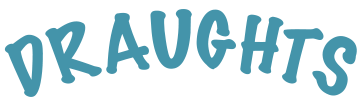
<style>
.page{position:relative;width:362px;height:104px;background:#ffffff}
.page>*{position:absolute;margin:0}
.t1{font:70px "MarkerFelt-Thin";color:#4494aa}
</style>
<div class="page">
<p class="t1" style="left:4px;top:9px;width:353px;height:88px">DRAUGHTS</p>
</div>
